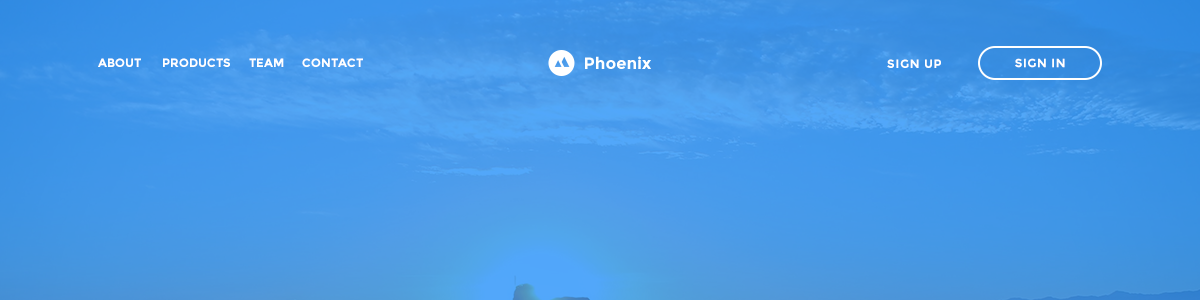
<style>
.page{position:relative;width:1200px;height:300px}
.page>*{position:absolute;margin:0}
.t1{font:12px "Montserrat-Bold";color:#ffffff;text-transform:uppercase}
.t2{font:16.4px "Montserrat-Bold";color:#ffffff}
.t3{font:12px "Montserrat-Bold";letter-spacing:0.05em;color:#ffffff;text-transform:uppercase}
</style>
<div class="page">
<p class="t1" style="left:98px;top:58px;width:265px;height:9px">About       Products      team      Contact</p>
<p class="t2" style="left:585px;top:56px;width:66px;height:13px">Phoenix</p>
<p class="t3" style="left:887px;top:59px;width:54px;height:9px">sign up</p>
<p class="t3" style="left:1015px;top:58px;width:50px;height:10px">sign in</p>
</div>
